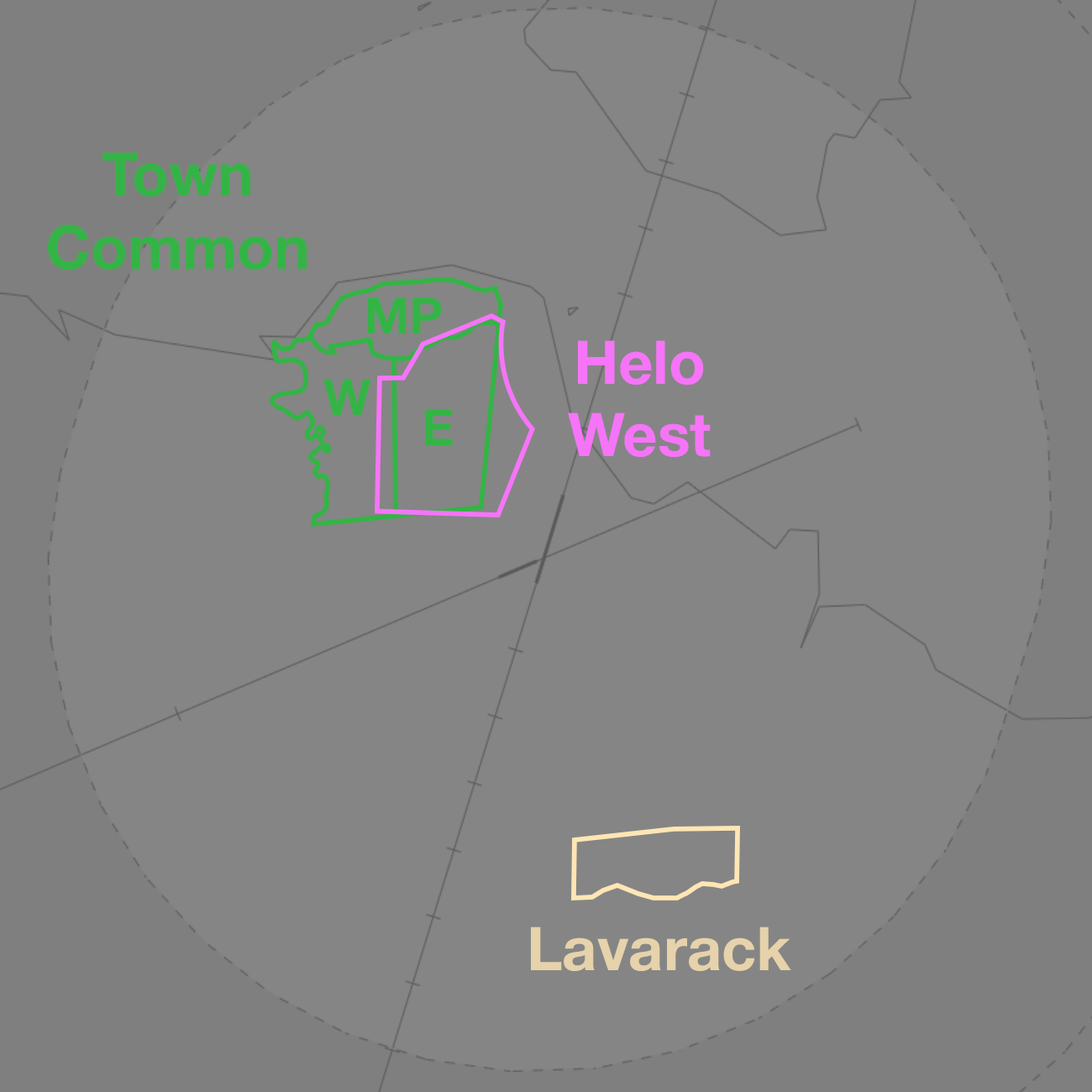
<style>
.page{position:relative;width:1092px;height:1092px;background:#858585}
.page>*{position:absolute;margin:0}
.t1{font:60.5px "HelveticaNeue-Bold";color:#34b446}
.t2{font:50.4px "HelveticaNeue-Bold";color:#34b446}
.t3{font:60.5px "HelveticaNeue-Bold";color:#f674f8}
.t4{font:60.5px "HelveticaNeue-Bold";color:#e6d2ab}
</style>
<div class="page">
<p class="t1" style="left:48px;top:152px;width:259px;height:118px;text-align:center">Town<br>Common</p>
<p class="t2" style="left:367px;top:297px;width:75px;height:36px">MP</p>
<p class="t3" style="left:568px;top:340px;width:143px;height:117px;text-align:center">Helo<br>West</p>
<p class="t2" style="left:323px;top:379px;width:48px;height:36px">W</p>
<p class="t2" style="left:425px;top:409px;width:28px;height:36px">E</p>
<p class="t4" style="left:531px;top:927px;width:260px;height:44px">Lavarack</p>
</div>
